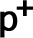
<style>
.page{position:relative;width:33px;height:38px;background:#ffffff}
.page>*{position:absolute;margin:0}
.t1{font:32px "MicrosoftSansSerif";color:#000000;font-weight:bold}
.t2{font:35px "MicrosoftSansSerif";color:#000000;font-weight:bold}
</style>
<div class="page">
<p class="t1" style="left:16px;top:0px;width:17px;height:16px">+</p>
<p class="t2" style="left:0px;top:11px;width:18px;height:27px">p</p>
</div>
